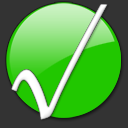
<style>
.page{position:relative;width:128px;height:128px;background:#333333}
.page>*{position:absolute;margin:0}
.t1{font:122.6px "LucidaHandwriting-Italic";letter-spacing:-0.05em;color:#ffffff}
</style>
<div class="page">
<p class="t1" style="left:11px;top:4px;width:97px;height:116px">√</p>
</div>
